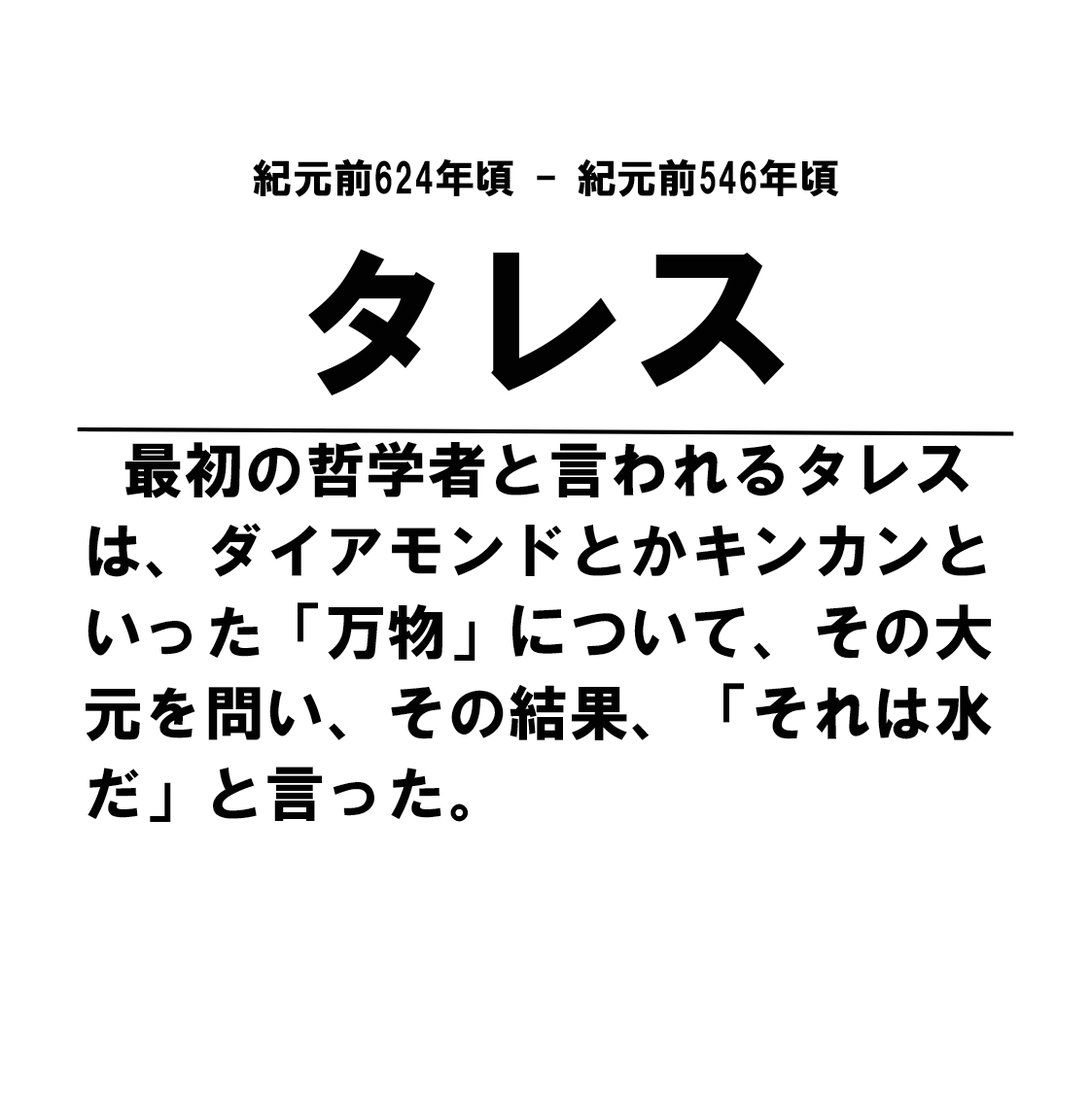
<style>
.page{position:relative;width:1091px;height:1093px;background:#ffffff}
.page>*{position:absolute;margin:0}
.t1{font:40.5px "HGSoeiKakugothicUB";color:#020202}
.t2{font:170.1px "HGSoeiKakugothicUB";color:#020202}
.t3{font:60.7px/81px "HGSoeiKakugothicUB";color:#020202}
.t4{font:40.5px/81px "HGSoeiKakugothicUB";color:#020202}
</style>
<div class="page">
<p class="t1" style="left:253px;top:158px;width:586px;height:39px">紀元前624年頃 - 紀元前546年頃</p>
<p class="t2" style="left:308px;top:249px;width:476px;height:147px">タレス</p>
<p class="t3" style="left:86px;top:441px;width:905px;height:381px"><span class="t4">　</span>最初の哲学者と言われるタレスは、ダイアモンドとかキンカンといった「万物」について、その大元を問い、その結果、「それは水だ」と言った。</p>
</div>
